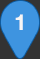
<style>
.page{position:relative;width:40px;height:59px;background:#3e94e0}
.page>*{position:absolute;margin:0}
.t1{font:22px "HelveticaNeue-Bold";color:#f7f6f5}
</style>
<div class="page">
<p class="t1" style="left:15px;top:14px;width:8px;height:16px">1</p>
</div>
